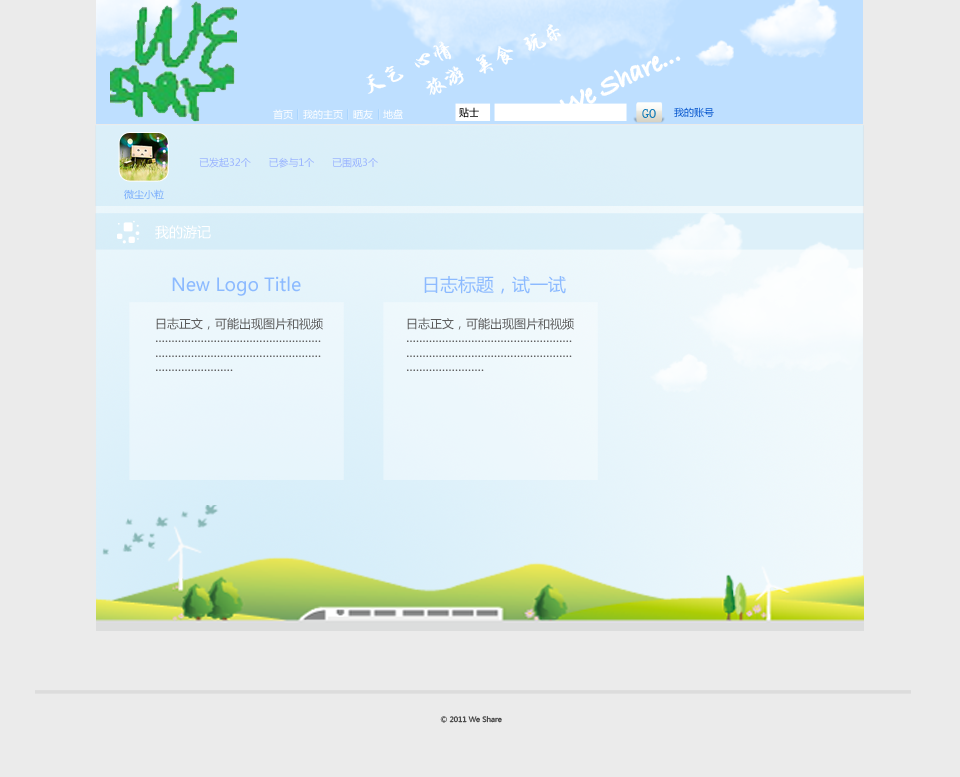
<style>
.page{position:relative;width:960px;height:777px;background:#ebebeb}
.page>*{position:absolute;margin:0}
.t1{font:21.5px/28.7px "HYi4gj";color:#ffffff}
.t2{font:27.1px "BradleyHandITC";color:#ffffff}
.t3{font:10px "MicrosoftYaHei";color:#ffffff}
.t4{font:10px "MicrosoftYaHei"}
.t5{font:14.1px "SimSun";color:#127cb8}
.t6{font:10px "MicrosoftYaHei";color:#0555cd}
.t7{font:10px "MicrosoftYaHei";color:#9ab4ff}
.t8{font:10px "MicrosoftYaHei";color:#79adfc}
.t9{font:14px "MicrosoftYaHei";color:#ffffff}
.t10{font:18px "MicrosoftYaHei";color:#8cbaff}
.t11{font:12px "MicrosoftYaHei";color:#5c5c5c}
</style>
<div class="page">
<p class="t1" style="left:366px;top:24px;width:195px;height:72px;rotate:-24deg">天气 心情 <br>     旅游 美食 玩乐</p>
<p class="t2" style="left:560px;top:56px;width:120px;height:56px;rotate:-26deg">We Share...</p>
<p class="t3" style="left:273px;top:109px;width:20px;height:11px">首页</p>
<p class="t3" style="left:303px;top:109px;width:40px;height:11px">我的主页</p>
<p class="t3" style="left:353px;top:109px;width:20px;height:11px">晒友</p>
<p class="t3" style="left:383px;top:109px;width:20px;height:10px">地盘</p>
<p class="t4" style="left:459px;top:107px;width:20px;height:11px">贴士</p>
<p class="t5" style="left:642px;top:109px;width:14px;height:9px">GO</p>
<p class="t6" style="left:674px;top:107px;width:40px;height:11px">我的账号</p>
<p class="t7" style="left:199px;top:157px;width:179px;height:11px">已发起32个      已参与1个      已围观3个</p>
<p class="t8" style="left:124px;top:189px;width:40px;height:11px">微尘小粒</p>
<p class="t9" style="left:155px;top:225px;width:56px;height:14px">我的游记</p>
<p class="t10" style="left:172px;top:276px;width:129px;height:20px">New Logo Title</p>
<p class="t10" style="left:424px;top:276px;width:142px;height:18px">日志标题，试一试</p>
<p class="t11" style="left:156px;top:317px;width:167px;height:54px">日志正文，可能出现图片和视频<br>……………………………………………<br>……………………………………………<br>……………………</p>
<p class="t11" style="left:407px;top:317px;width:167px;height:54px">日志正文，可能出现图片和视频<br>……………………………………………<br>……………………………………………<br>……………………</p>
</div>
